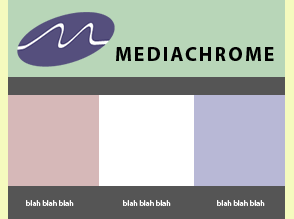
<style>
.page{position:relative;width:294px;height:219px;background:#b8d6b8}
.page>*{position:absolute;margin:0}
.t1{font:20px "MyriadPro-Bold";letter-spacing:0.1em;color:#000000}
.t2{font:8px "MyriadPro-Regular";color:#ffffff}
</style>
<div class="page">
<p class="t1" style="left:116px;top:47px;width:158px;height:14px">MEDIACHROME</p>
<p class="t2" style="left:26px;top:200px;width:48px;height:6px">blah blah blah</p>
<p class="t2" style="left:123px;top:200px;width:48px;height:6px">blah blah blah</p>
<p class="t2" style="left:217px;top:200px;width:48px;height:6px">blah blah blah</p>
</div>
